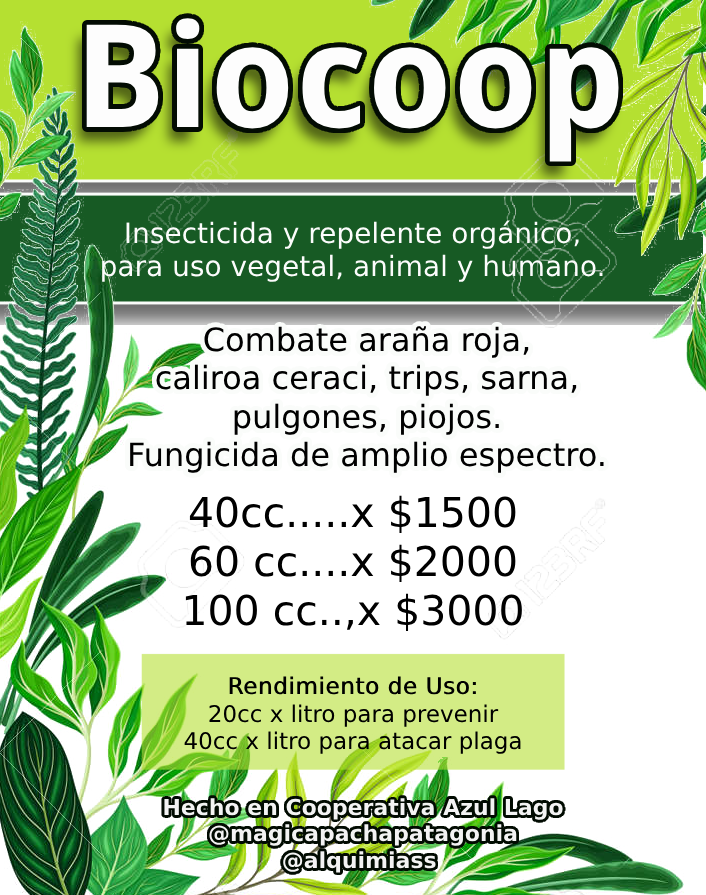
<style>
.page{position:relative;width:706px;height:895px;background:#ffffff}
.page>*{position:absolute;margin:0}
.t1{font:143.3px "DroidSans-Bold";color:#fdfdfd}
.t2{font:28px "DejaVuSans";color:#fcfcfc}
.t3{font:28px "DejaVuSans";color:#3ec962}
.t4{font:32px "DejaVuSans";color:#000000}
.t5{font:41px "DejaVuSans";color:#000000}
.t6{font:23px "DejaVuSans";color:#000000}
.t7{font:23px "DejaVuSans";color:#000000;font-weight:bold}
.t8{font:22px "DejaVuSans-Bold";color:#f3f3f3}
</style>
<div class="page">
<p class="t1" style="left:86px;top:18px;width:533px;height:144px">Biocoop</p>
<p class="t2" style="left:102px;top:220px;width:501px;height:62px;text-align:center"><span class="t3"><br></span>Insecticida y repelente orgánico, <br>para uso vegetal, animal y humano.</p>
<p class="t4" style="left:130px;top:326px;width:474px;height:147px;text-align:center">Combate araña roja,<br>caliroa ceraci, trips, sarna,<br>pulgones, piojos.<br>Fungicida de amplio espectro.</p>
<p class="t5" style="left:185px;top:495px;width:337px;height:137px;text-align:center">40cc.....x $1500<br>60 cc....x $2000<br>100 cc..,x $3000</p>
<p class="t6" style="left:184px;top:676px;width:337px;height:78px;text-align:center"><span class="t7">Rendimiento de Uso:<br></span>20cc x litro para prevenir<br>40cc x litro para atacar plaga</p>
<p class="t8" style="left:164px;top:798px;width:399px;height:75px;text-align:center">Hecho en Cooperativa Azul Lago<br> @magicapachapatagonia <br>@alquimiass</p>
</div>
